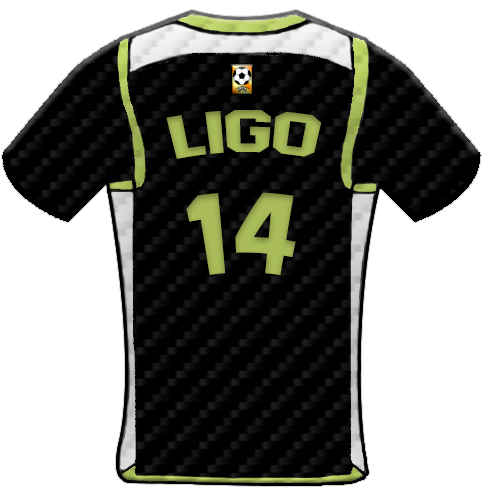
<style>
.page{position:relative;width:482px;height:494px;background:#ffffff}
.page>*{position:absolute;margin:0}
.t1{font:59.4px "AdidasHalfBlock2016";color:#a9bc59;scale:1.13 1}
.t2{font:113.8px "AdidasHalfBlock2016";color:#a9bc59}
</style>
<div class="page">
<p class="t1" style="left:166px;top:110px;width:156px;height:49px">Ligo</p>
<p class="t2" style="left:186px;top:192px;width:110px;height:83px">14</p>
</div>
